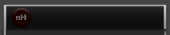
<style>
.page{position:relative;width:170px;height:35px}
.page>*{position:absolute;margin:0}
.t1{font:7px "BorisBlackBloxx";color:#616161}
</style>
<div class="page">
<p class="t1" style="left:16px;top:14px;width:11px;height:6px">nH</p>
</div>
